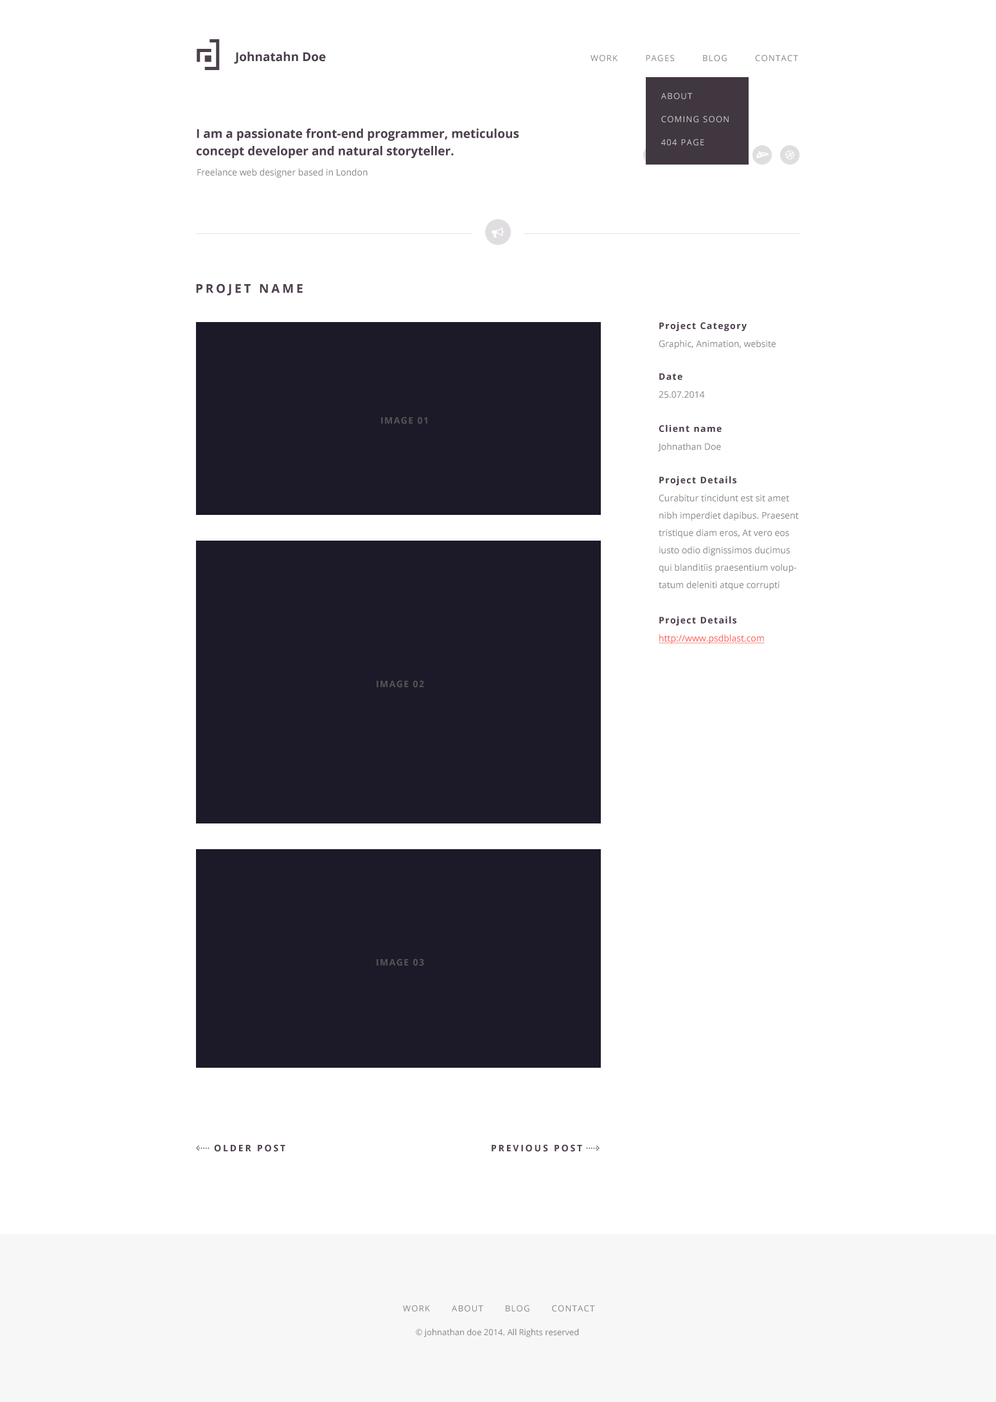
<style>
.page{position:relative;width:996px;height:1402px;background:#ffffff}
.page>*{position:absolute;margin:0}
.t1{font:12.2px "OpenSans-Bold";color:#4c404d}
.t2{font:8.4px "OpenSans";letter-spacing:0.1em;color:#898889;text-transform:uppercase}
.t3{font:8.4px/23.1px "OpenSans";letter-spacing:0.1em;color:#cbcbcb;text-transform:uppercase}
.t4{font:12.2px/17.4px "OpenSans-Bold";color:#4c404d}
.t5{font:9px "OpenSans";color:#898889}
.t6{font:12.2px "OpenSans-Bold";letter-spacing:0.2em;color:#4c404d;text-transform:uppercase}
.t7{font:9px "OpenSans-Bold";letter-spacing:0.1em;color:#4c404d}
.t8{font:9px/17.4px "OpenSans";color:#898889}
.t9{font:9px "OpenSans";color:#ff5e56;text-decoration:underline}
.t10{font:9px "OpenSans-Bold";letter-spacing:0.2em;color:#4c404d;text-transform:uppercase}
.t11{font:8.4px "OpenSans";color:#898889}
</style>
<div class="page">
<p class="t1" style="left:234px;top:51px;width:92px;height:13px">Johnatahn Doe</p>
<p class="t2" style="left:591px;top:55px;width:207px;height:7px">work         Pages         blog         contact</p>
<p class="t3" style="left:661px;top:93px;width:68px;height:53px">About<br>Coming Soon<br>404 page</p>
<p class="t4" style="left:196px;top:129px;width:323px;height:29px">I am a passionate front-end programmer, meticulous concept developer and natural storyteller.</p>
<p class="t5" style="left:197px;top:168px;width:171px;height:10px">Freelance web designer based in London</p>
<p class="t6" style="left:196px;top:284px;width:107px;height:12px">Projet Name</p>
<p class="t7" style="left:660px;top:322px;width:87px;height:9px">Project Category</p>
<p class="t5" style="left:659px;top:340px;width:117px;height:9px">Graphic, Animation, website</p>
<p class="t7" style="left:660px;top:373px;width:23px;height:7px">Date</p>
<p class="t5" style="left:659px;top:391px;width:46px;height:7px">25.07.2014</p>
<p class="t7" style="left:659px;top:425px;width:63px;height:7px">Client name</p>
<p class="t5" style="left:658px;top:443px;width:63px;height:9px">Johnathan Doe</p>
<p class="t7" style="left:660px;top:476px;width:77px;height:9px">Project Details</p>
<p class="t8" style="left:659px;top:494px;width:140px;height:96px">Curabitur tincidunt est sit amet nibh imperdiet dapibus. Praesent tristique diam eros, At vero eos  iusto odio dignissimos ducimus qui blanditiis praesentium voluptatum deleniti atque corrupti</p>
<p class="t7" style="left:660px;top:616px;width:77px;height:10px">Project Details</p>
<p class="t9" style="left:659px;top:634px;width:106px;height:10px">http://www.psdblast.com</p>
<p class="t10" style="left:214px;top:1144px;width:71px;height:8px">Older Post</p>
<p class="t10" style="left:492px;top:1144px;width:90px;height:8px">Previous Post</p>
<p class="t2" style="left:403px;top:1305px;width:192px;height:7px">work       about       blog       contact</p>
<p class="t11" style="left:416px;top:1329px;width:163px;height:8px">© johnathan doe 2014. All Rights reserved</p>
</div>
